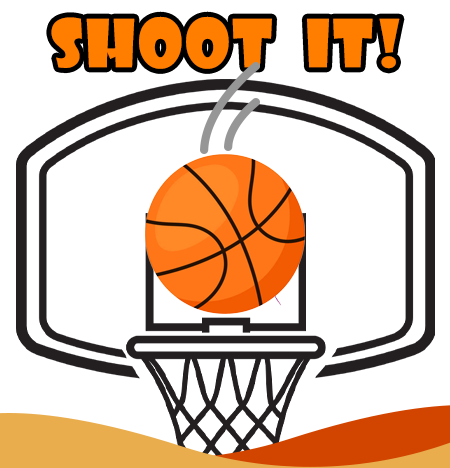
<style>
.page{position:relative;width:450px;height:468px;background:#ffffff}
.page>*{position:absolute;margin:0}
.t1{font:64.3px "ShowcardGothic-Reg";letter-spacing:0.04em;color:#ff7e00}
</style>
<div class="page">
<p class="t1" style="left:51px;top:16px;width:349px;height:53px">shoot  it!</p>
</div>
